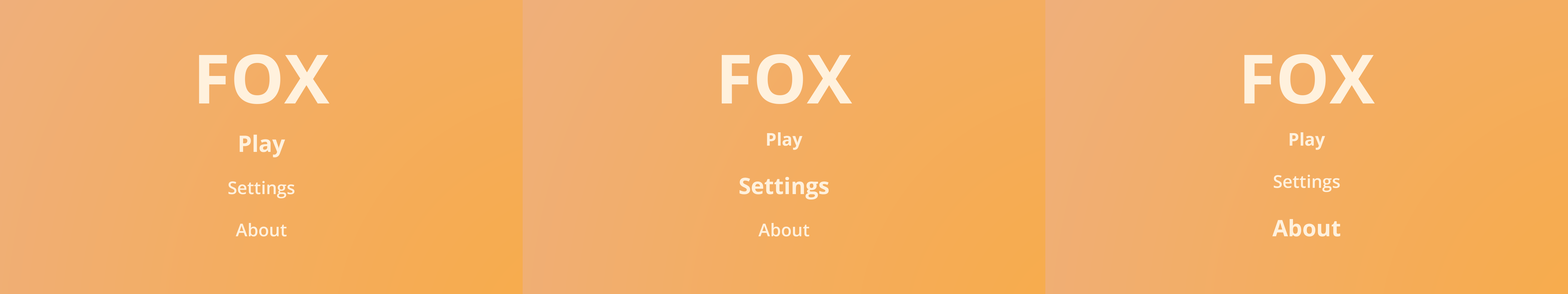
<style>
.page{position:relative;width:1568px;height:294px}
.page>*{position:absolute;margin:0}
.t1{font:17.6px "OpenSans-Semibold";color:#fff1dd}
.t2{font:17.6px "OpenSans-Bold";color:#8f8b8b}
.t3{font:68.1px "OpenSans-Bold";color:#fff1dd}
.t4{font:22.7px "OpenSans-Bold";color:#fff1dd}
.t5{font:17.6px "OpenSans-Bold";color:#fff1dd}
</style>
<div class="page">
<p class="t1" style="left:199px;top:54px;width:131px;height:183px;text-align:center"><span class="t2"><br><br><br></span><span class="t3">FOX<br><br></span><span class="t4">Play<br></span><br>Settings<br><br>About</p>
<p class="t4" style="left:722px;top:54px;width:130px;height:183px;text-align:center"><span class="t2"><br><br><br></span><span class="t3">FOX<br></span><span class="t5"><br>Play<br><br></span>Settings<br><span class="t1"><br>About</span></p>
<p class="t1" style="left:1244px;top:54px;width:131px;height:183px;text-align:center"><span class="t2"><br><br><br></span><span class="t3">FOX<br></span><span class="t5"><br>Play<br></span><br>Settings<br><br><span class="t4">About</span></p>
</div>
